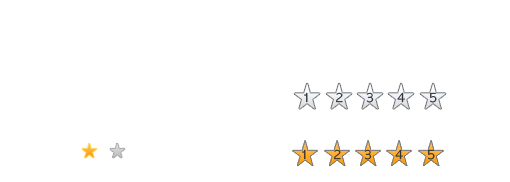
<style>
.page{position:relative;width:510px;height:182px;background:#ffffff}
.page>*{position:absolute;margin:0}
.t1{font:12px "AppleGothic";color:#343434}
</style>
<div class="page">
<p class="t1" style="left:304px;top:92px;width:4px;height:11px">1</p>
<p class="t1" style="left:336px;top:92px;width:7px;height:11px">2</p>
<p class="t1" style="left:366px;top:92px;width:8px;height:11px">3</p>
<p class="t1" style="left:397px;top:92px;width:8px;height:11px">4</p>
<p class="t1" style="left:430px;top:92px;width:7px;height:11px">5</p>
<p class="t1" style="left:302px;top:149px;width:4px;height:11px">1</p>
<p class="t1" style="left:334px;top:149px;width:7px;height:11px">2</p>
<p class="t1" style="left:364px;top:149px;width:8px;height:11px">3</p>
<p class="t1" style="left:395px;top:149px;width:8px;height:11px">4</p>
<p class="t1" style="left:428px;top:149px;width:7px;height:11px">5</p>
</div>
